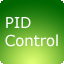
<style>
.page{position:relative;width:64px;height:64px}
.page>*{position:absolute;margin:0}
.t1{font:14.9px "Verdana";color:#ffffff}
</style>
<div class="page">
<p class="t1" style="left:5px;top:17px;width:53px;height:30px">PID<br>Control</p>
</div>
